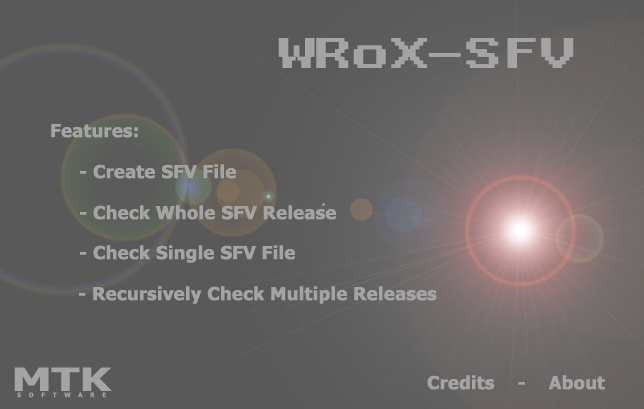
<style>
.page{position:relative;width:644px;height:409px;background:#595959}
.page>*{position:absolute;margin:0}
.t1{font:48px "WST_Fren";color:#a4a4a4}
.t2{font:18px "Tahoma-Bold";color:#a4a4a4;font-weight:bold}
.t3{font:32px "Tahoma-Bold";color:#a4a4a4;scale:1.41 1}
.t4{font:6px "Tahoma-Bold";color:#a4a4a4;font-weight:bold}
</style>
<div class="page">
<p class="t1" style="left:278px;top:38px;width:294px;height:30px">WRoX-SFV</p>
<p class="t1" style="left:280px;top:38px;width:294px;height:30px">WRoX-SFV</p>
<p class="t2" style="left:51px;top:124px;width:87px;height:14px">Features:</p>
<p class="t2" style="left:80px;top:164px;width:156px;height:15px">- Create SFV File</p>
<p class="t2" style="left:80px;top:205px;width:256px;height:15px">- Check Whole SFV Release</p>
<p class="t2" style="left:80px;top:245px;width:215px;height:18px">- Check Single SFV File</p>
<p class="t2" style="left:79px;top:286px;width:358px;height:18px">- Recursively Check Multiple Releases</p>
<p class="t3" style="left:14px;top:367px;width:98px;height:24px">MTK</p>
<p class="t2" style="left:427px;top:375px;width:178px;height:15px">Credits    -    About</p>
<p class="t4" style="left:17px;top:392px;width:89px;height:6px">S    O    F    T    W    A    R    E</p>
</div>
